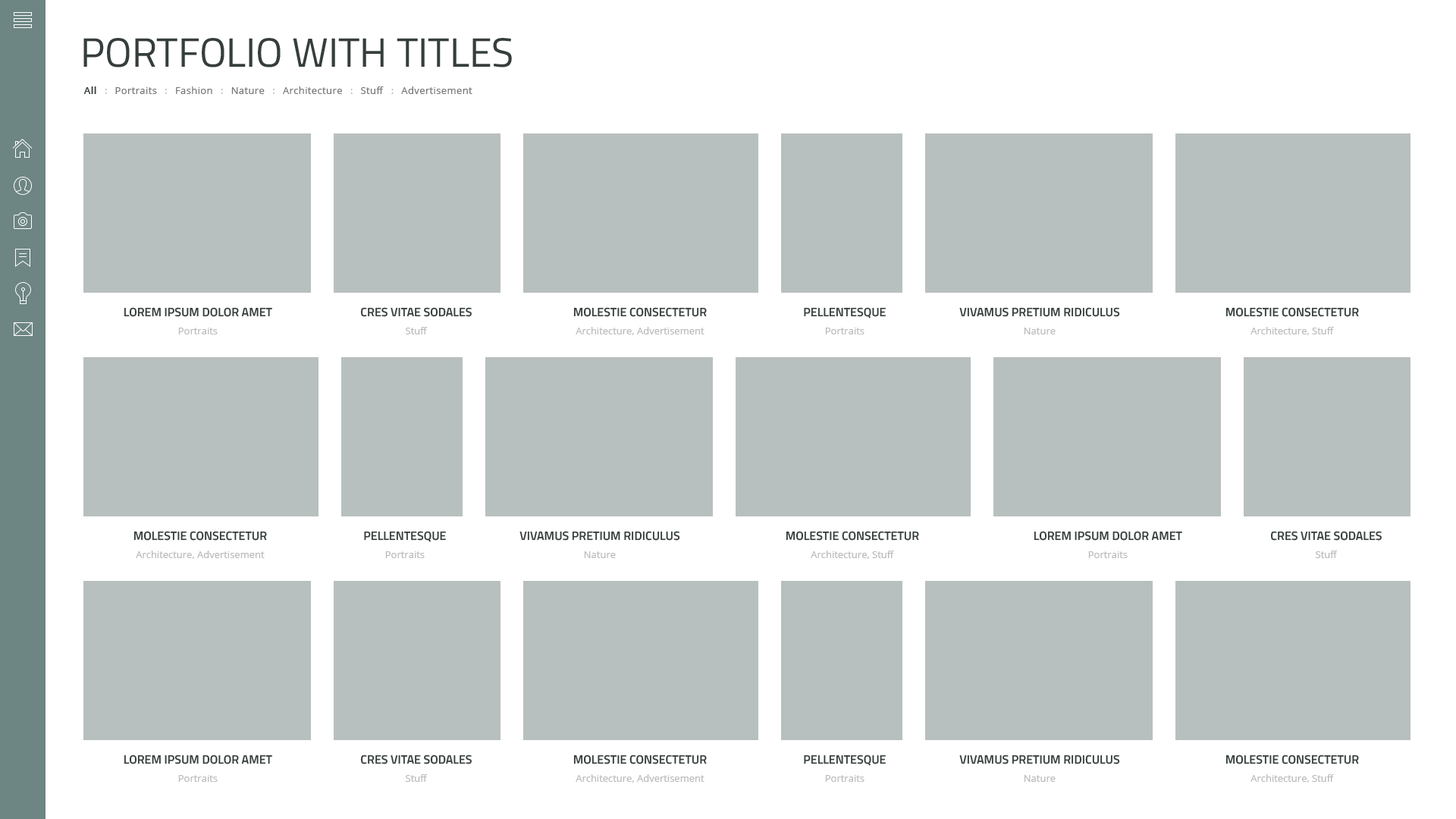
<style>
.page{position:relative;width:1456px;height:819px;background:#b8c0bf}
.page>*{position:absolute;margin:0}
.t1{font:40.9px "TitilliumWeb-Regular";color:#353e3d;text-transform:uppercase}
.t2{font:9.9px "OpenSans";letter-spacing:0.03em;color:#777979}
.t3{font:9.9px "OpenSans-Semibold";letter-spacing:0.03em;color:#353e3d}
.t4{font:9.9px "OpenSans";color:#bababa}
.t5{font:12.1px "TitilliumWeb-SemiBold";color:#353e3d;text-transform:uppercase}
.t6{font:9.9px/18.2px "OpenSans";color:#bababa}
</style>
<div class="page">
<p class="t1" style="left:83px;top:38px;width:429px;height:29px">Portfolio with titles</p>
<p class="t2" style="left:83px;top:86px;width:389px;height:8px"><span class="t3">All  </span><span class="t4"> :   </span>Portraits<span class="t4">   :   </span>Fashion<span class="t4">   :   </span>Nature   <span class="t4">:   </span>Architecture   <span class="t4">:   </span>Stuff <span class="t4">  :   </span>Advertisement</p>
<p class="t5" style="left:124px;top:307px;width:148px;height:27px;text-align:center">Lorem Ipsum Dolor amet<br><span class="t6">Portraits</span></p>
<p class="t5" style="left:360px;top:307px;width:112px;height:27px;text-align:center">cres vitae sodales<br><span class="t6">Stuff</span></p>
<p class="t6" style="left:573px;top:307px;width:134px;height:28px;text-align:center"><span class="t5">molestie consectetur<br></span>Architecture, Advertisement</p>
<p class="t5" style="left:804px;top:307px;width:82px;height:27px;text-align:center">Pellentesque<br><span class="t6">Portraits</span></p>
<p class="t5" style="left:959px;top:307px;width:161px;height:27px;text-align:center">vivamus pretium ridiculus<br><span class="t6">Nature</span></p>
<p class="t5" style="left:1225px;top:307px;width:134px;height:28px;text-align:center">molestie consectetur<br><span class="t6">Architecture, Stuff</span></p>
<p class="t6" style="left:133px;top:531px;width:134px;height:28px;text-align:center"><span class="t5">molestie consectetur<br></span>Architecture, Advertisement</p>
<p class="t5" style="left:364px;top:531px;width:82px;height:27px;text-align:center">Pellentesque<br><span class="t6">Portraits</span></p>
<p class="t5" style="left:519px;top:531px;width:161px;height:27px;text-align:center">vivamus pretium ridiculus<br><span class="t6">Nature</span></p>
<p class="t5" style="left:786px;top:531px;width:133px;height:28px;text-align:center">molestie consectetur<br><span class="t6">Architecture, Stuff</span></p>
<p class="t5" style="left:1034px;top:531px;width:148px;height:27px;text-align:center">Lorem Ipsum Dolor amet<br><span class="t6">Portraits</span></p>
<p class="t5" style="left:1270px;top:531px;width:112px;height:27px;text-align:center">cres vitae sodales<br><span class="t6">Stuff</span></p>
<p class="t5" style="left:124px;top:755px;width:148px;height:27px;text-align:center">Lorem Ipsum Dolor amet<br><span class="t6">Portraits</span></p>
<p class="t5" style="left:360px;top:755px;width:112px;height:27px;text-align:center">cres vitae sodales<br><span class="t6">Stuff</span></p>
<p class="t6" style="left:573px;top:755px;width:134px;height:28px;text-align:center"><span class="t5">molestie consectetur<br></span>Architecture, Advertisement</p>
<p class="t5" style="left:804px;top:755px;width:82px;height:27px;text-align:center">Pellentesque<br><span class="t6">Portraits</span></p>
<p class="t5" style="left:959px;top:755px;width:161px;height:27px;text-align:center">vivamus pretium ridiculus<br><span class="t6">Nature</span></p>
<p class="t5" style="left:1225px;top:755px;width:134px;height:28px;text-align:center">molestie consectetur<br><span class="t6">Architecture, Stuff</span></p>
</div>
